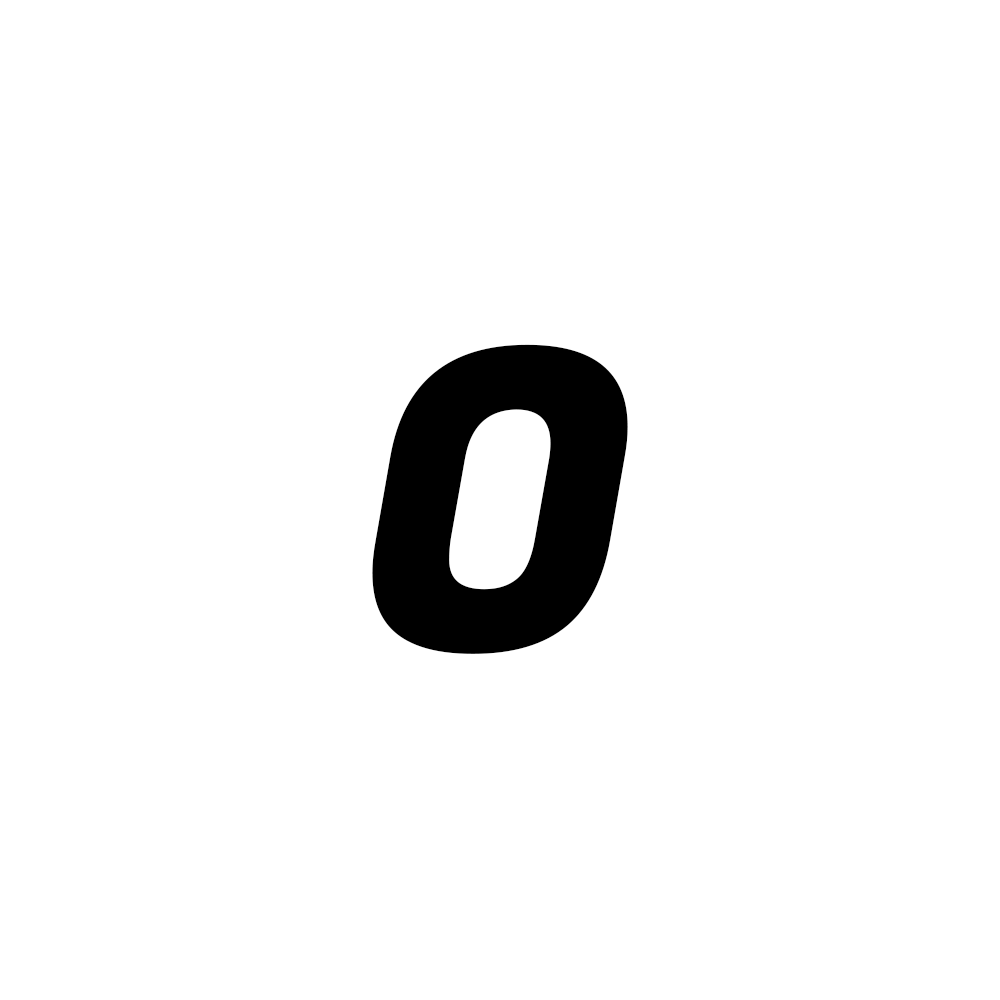
<style>
.page{position:relative;width:1000px;height:1000px;background:#ffffff}
.page>*{position:absolute;margin:0}
.t1{font:416.7px "FugazOne-Regular";color:#000000}
</style>
<div class="page">
<p class="t1" style="left:372px;top:344px;width:256px;height:310px">O</p>
</div>
